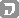
<style>
.page{position:relative;width:19px;height:18px;background:#919191}
.page>*{position:absolute;margin:0}
.t1{font:18px "WarPriest";color:#ffffff}
</style>
<div class="page">
<p class="t1" style="left:4px;top:3px;width:11px;height:12px">J</p>
</div>
